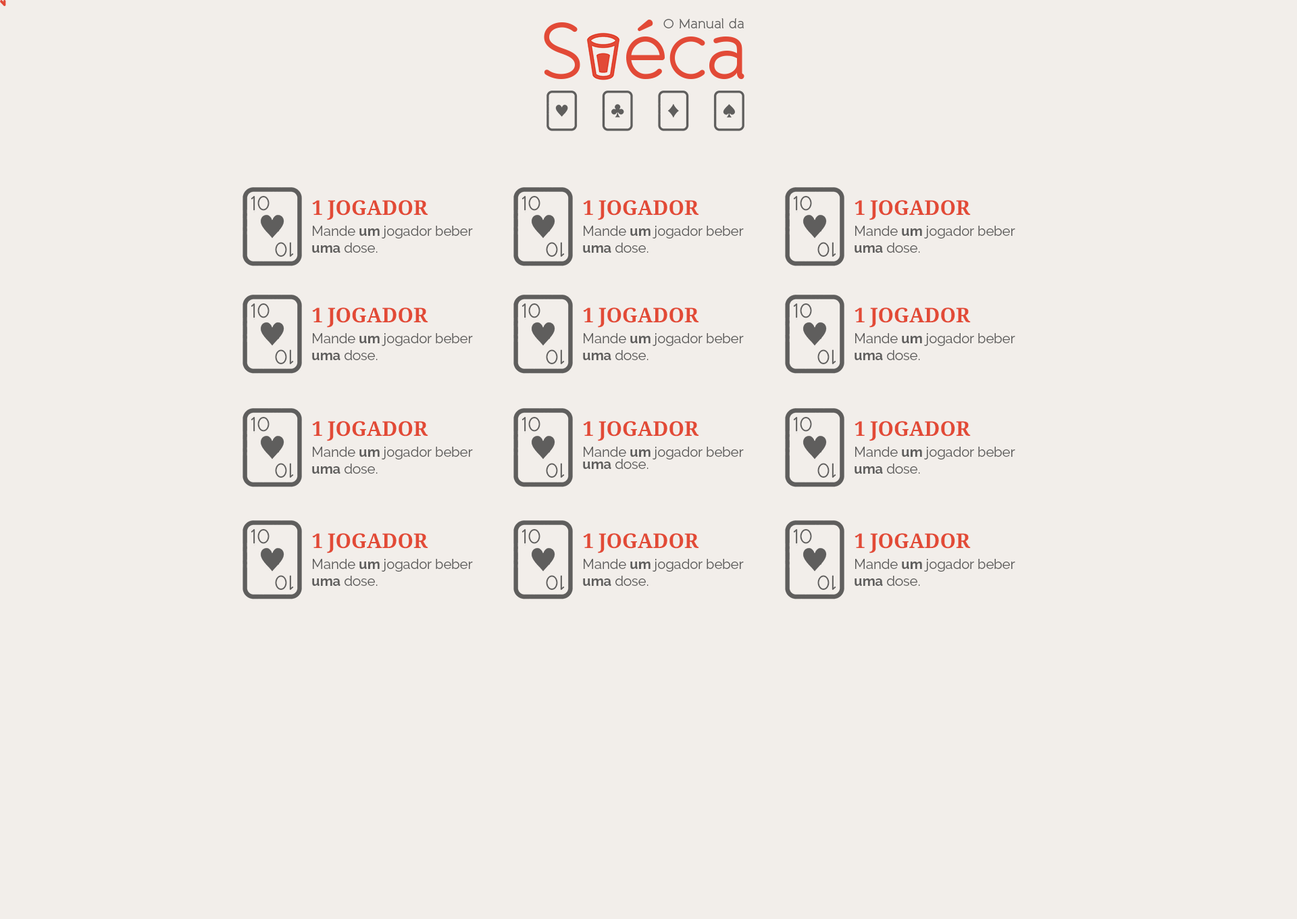
<style>
.page{position:relative;width:1297px;height:919px;background:#f2eeea}
.page>*{position:absolute;margin:0}
.t1{font:8.1px "VAL";color:#e24936}
.t2{font:13.7px "BandaRegular";color:#5f5e5d}
.t3{font:20.3px "DroidSerif-Bold";color:#e24a36;text-transform:uppercase}
.t4{font:13.7px "Raleway-Regular";color:#5f5e5d}
.t5{font:13.7px "Raleway-Bold";color:#5f5e5d}
.t6{font:13.7px/12.2px "Raleway-Regular";color:#5f5e5d}
.t7{font:13.7px/12.2px "Raleway-Bold";color:#5f5e5d}
</style>
<div class="page">
<p class="t1" style="left:0px;top:0px;width:6px;height:6px">v</p>
<p class="t2" style="left:664px;top:18px;width:80px;height:10px">O Manual da</p>
<p class="t3" style="left:312px;top:200px;width:116px;height:20px">1 jogador</p>
<p class="t3" style="left:583px;top:200px;width:116px;height:20px">1 jogador</p>
<p class="t3" style="left:855px;top:200px;width:116px;height:20px">1 jogador</p>
<p class="t4" style="left:312px;top:226px;width:161px;height:27px">Mande <span class="t5">um</span> jogador beber<br><span class="t5">uma</span> dose.</p>
<p class="t4" style="left:583px;top:226px;width:161px;height:27px">Mande <span class="t5">um</span> jogador beber<br><span class="t5">uma</span> dose.</p>
<p class="t4" style="left:855px;top:226px;width:161px;height:27px">Mande <span class="t5">um</span> jogador beber<br><span class="t5">uma</span> dose.</p>
<p class="t3" style="left:312px;top:307px;width:116px;height:21px">1 jogador</p>
<p class="t3" style="left:583px;top:307px;width:116px;height:21px">1 jogador</p>
<p class="t3" style="left:855px;top:307px;width:116px;height:21px">1 jogador</p>
<p class="t4" style="left:312px;top:333px;width:161px;height:27px">Mande <span class="t5">um</span> jogador beber<br><span class="t5">uma</span> dose.</p>
<p class="t4" style="left:583px;top:333px;width:161px;height:27px">Mande <span class="t5">um</span> jogador beber<br><span class="t5">uma</span> dose.</p>
<p class="t4" style="left:855px;top:333px;width:161px;height:27px">Mande <span class="t5">um</span> jogador beber<br><span class="t5">uma</span> dose.</p>
<p class="t3" style="left:312px;top:421px;width:116px;height:20px">1 jogador</p>
<p class="t3" style="left:583px;top:421px;width:116px;height:20px">1 jogador</p>
<p class="t3" style="left:855px;top:421px;width:116px;height:20px">1 jogador</p>
<p class="t4" style="left:312px;top:447px;width:161px;height:27px">Mande <span class="t5">um</span> jogador beber<br><span class="t5">uma</span> dose.</p>
<p class="t6" style="left:583px;top:447px;width:161px;height:22px">Mande <span class="t7">um</span> jogador beber<br><span class="t7">uma</span> dose.</p>
<p class="t4" style="left:855px;top:447px;width:161px;height:27px">Mande <span class="t5">um</span> jogador beber<br><span class="t5">uma</span> dose.</p>
<p class="t3" style="left:312px;top:533px;width:116px;height:20px">1 jogador</p>
<p class="t3" style="left:583px;top:533px;width:116px;height:20px">1 jogador</p>
<p class="t3" style="left:855px;top:533px;width:116px;height:20px">1 jogador</p>
<p class="t4" style="left:312px;top:559px;width:161px;height:27px">Mande <span class="t5">um</span> jogador beber<br><span class="t5">uma</span> dose.</p>
<p class="t4" style="left:583px;top:559px;width:161px;height:27px">Mande <span class="t5">um</span> jogador beber<br><span class="t5">uma</span> dose.</p>
<p class="t4" style="left:855px;top:559px;width:161px;height:27px">Mande <span class="t5">um</span> jogador beber<br><span class="t5">uma</span> dose.</p>
</div>
